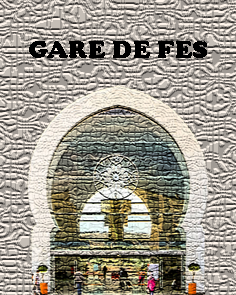
<style>
.page{position:relative;width:236px;height:295px}
.page>*{position:absolute;margin:0}
.t1{font:25px "CooperBlack";letter-spacing:0.025em;color:#000000}
</style>
<div class="page">
<p class="t1" style="left:29px;top:41px;width:178px;height:17px">GARE DE FES</p>
</div>
